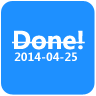
<style>
.page{position:relative;width:96px;height:96px;background:#1e90ff}
.page>*{position:absolute;margin:0}
.t1{font:24px "MicrosoftYaHei-Bold";color:#ffffff}
.t2{font:11px "MicrosoftYaHei-Bold";color:#ffffff}
</style>
<div class="page">
<p class="t1" style="left:12px;top:30px;width:73px;height:20px">Done!</p>
<p class="t2" style="left:14px;top:52px;width:63px;height:9px">2014-04-25</p>
</div>
